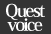
<style>
.page{position:relative;width:51px;height:34px;background:#333333}
.page>*{position:absolute;margin:0}
.t1{font:18px/14px "HeiseiMinStd-W7";letter-spacing:-0.08em;color:#ffffff}
</style>
<div class="page">
<p class="t1" style="left:6px;top:3px;width:39px;height:28px;text-align:center">Quest<br>voice</p>
</div>
